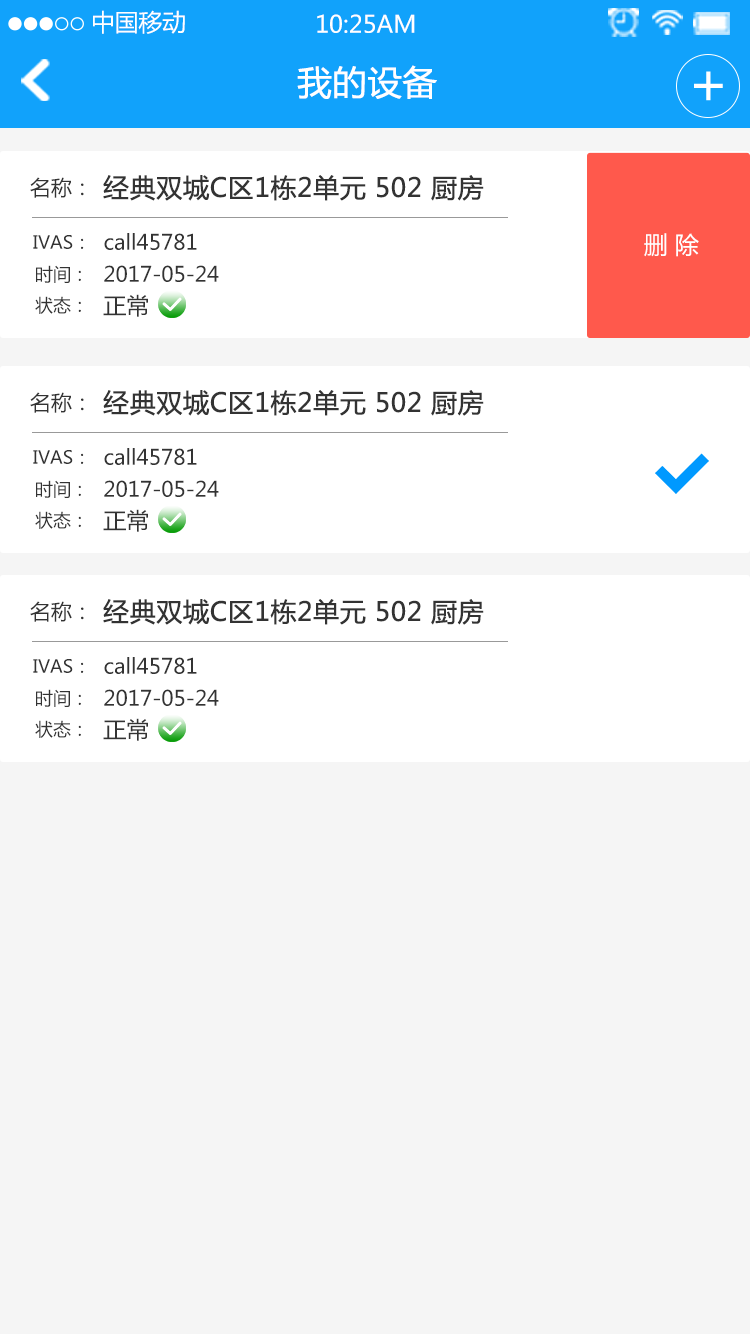
<style>
.page{position:relative;width:750px;height:1334px;background:#f5f5f5}
.page>*{position:absolute;margin:0}
.t1{font:23.7px "MicrosoftYaHei";color:#ffffff}
.t2{font:34px "MicrosoftYaHei";color:#ffffff;font-weight:bold}
.t3{font:20.9px "MicrosoftYaHei";color:#333333}
.t4{font:26px "MicrosoftYaHei";color:#333333;font-weight:bold}
.t5{font:24px "MicrosoftYaHei";color:#ffffff}
.t6{font:17.9px "MicrosoftYaHei";color:#333333}
.t7{font:23px "MicrosoftYaHei";color:#333333}
</style>
<div class="page">
<p class="t1" style="left:93px;top:10px;width:92px;height:24px">中国移动</p>
<p class="t1" style="left:317px;top:14px;width:98px;height:19px">10:25AM</p>
<p class="t2" style="left:297px;top:65px;width:140px;height:34px">我的设备</p>
<p class="t3" style="left:30px;top:177px;width:54px;height:21px">名称：</p>
<p class="t4" style="left:103px;top:175px;width:381px;height:26px">经典双城C区1栋2单元 502 厨房</p>
<p class="t3" style="left:104px;top:233px;width:93px;height:17px">call45781</p>
<p class="t5" style="left:644px;top:233px;width:55px;height:24px">删 除</p>
<p class="t6" style="left:33px;top:235px;width:51px;height:14px">IVAS：</p>
<p class="t6" style="left:36px;top:265px;width:45px;height:18px">时间：</p>
<p class="t3" style="left:104px;top:265px;width:115px;height:17px">2017-05-24</p>
<p class="t7" style="left:103px;top:294px;width:45px;height:23px">正常</p>
<p class="t6" style="left:35px;top:296px;width:46px;height:18px">状态：</p>
<p class="t4" style="left:103px;top:390px;width:381px;height:26px">经典双城C区1栋2单元 502 厨房</p>
<p class="t3" style="left:30px;top:392px;width:54px;height:21px">名称：</p>
<p class="t3" style="left:104px;top:448px;width:93px;height:17px">call45781</p>
<p class="t6" style="left:33px;top:450px;width:51px;height:14px">IVAS：</p>
<p class="t6" style="left:36px;top:480px;width:45px;height:18px">时间：</p>
<p class="t3" style="left:104px;top:480px;width:115px;height:17px">2017-05-24</p>
<p class="t7" style="left:103px;top:509px;width:45px;height:23px">正常</p>
<p class="t6" style="left:35px;top:511px;width:46px;height:18px">状态：</p>
<p class="t3" style="left:30px;top:601px;width:54px;height:21px">名称：</p>
<p class="t4" style="left:103px;top:599px;width:381px;height:26px">经典双城C区1栋2单元 502 厨房</p>
<p class="t6" style="left:33px;top:659px;width:51px;height:14px">IVAS：</p>
<p class="t3" style="left:104px;top:657px;width:93px;height:17px">call45781</p>
<p class="t6" style="left:36px;top:689px;width:45px;height:18px">时间：</p>
<p class="t3" style="left:104px;top:689px;width:115px;height:17px">2017-05-24</p>
<p class="t6" style="left:35px;top:720px;width:46px;height:18px">状态：</p>
<p class="t7" style="left:103px;top:718px;width:45px;height:23px">正常</p>
</div>
